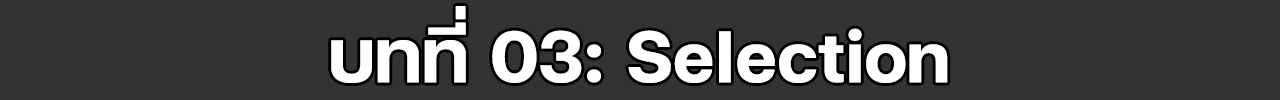
<style>
.page{position:relative;width:1280px;height:100px;background:#333333}
.page>*{position:absolute;margin:0}
.t1{font:100px "FCMinimalBold";color:#ffffff}
</style>
<div class="page">
<p class="t1" style="left:331px;top:6px;width:617px;height:77px">บทที่ 03: Selection</p>
</div>
